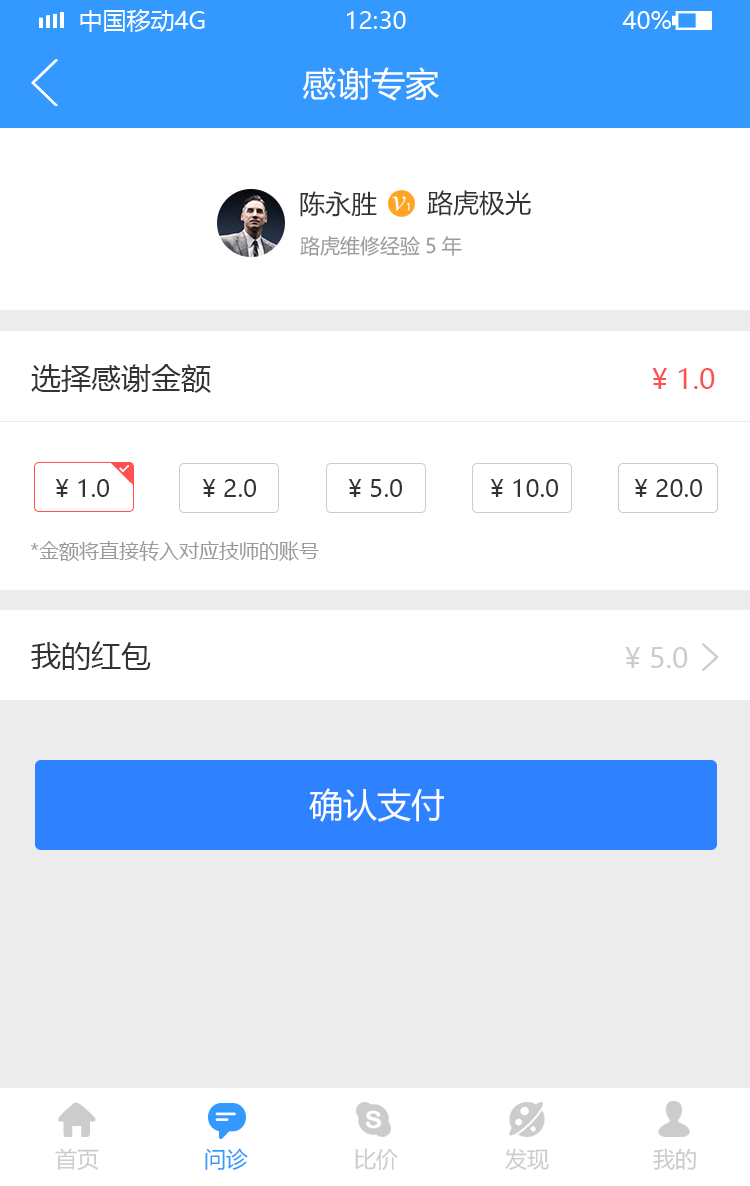
<style>
.page{position:relative;width:750px;height:1186px;background:#ffffff}
.page>*{position:absolute;margin:0}
.t1{font:34px "MicrosoftYaHei";color:#ffffff}
.t2{font:26px "MicrosoftYaHei";color:#333333}
.t3{font:20px "MicrosoftYaHei";color:#999999}
.t4{font:30px "MicrosoftYaHei";color:#333333}
.t5{font:28px "MicrosoftYaHei";color:#ff5050}
.t6{font:24px "MicrosoftYaHei";color:#333333}
.t7{font:28px "MicrosoftYaHei";color:#cccccc}
.t8{font:22px "MicrosoftYaHei";color:#cccccc}
.t9{font:22px "MicrosoftYaHei";color:#3399ff}
</style>
<div class="page">
<p class="t1" style="left:302px;top:67px;width:137px;height:34px">感谢专家</p>
<p class="t2" style="left:300px;top:191px;width:77px;height:26px">陈永胜</p>
<p class="t2" style="left:427px;top:190px;width:104px;height:26px">路虎极光</p>
<p class="t3" style="left:300px;top:236px;width:162px;height:20px">路虎维修经验5年</p>
<p class="t4" style="left:31px;top:364px;width:180px;height:29px">选择感谢金额</p>
<p class="t5" style="left:652px;top:368px;width:63px;height:21px">¥ 1.0</p>
<p class="t6" style="left:55px;top:479px;width:54px;height:18px">¥ 1.0</p>
<p class="t6" style="left:202px;top:479px;width:54px;height:18px">¥ 2.0</p>
<p class="t6" style="left:348px;top:479px;width:54px;height:18px">¥ 5.0</p>
<p class="t6" style="left:490px;top:479px;width:68px;height:18px">¥ 10.0</p>
<p class="t6" style="left:634px;top:479px;width:68px;height:18px">¥ 20.0</p>
<p class="t3" style="left:30px;top:541px;width:289px;height:20px">*金额将直接转入对应技师的账号</p>
<p class="t4" style="left:31px;top:641px;width:120px;height:29px">我的红包</p>
<p class="t7" style="left:625px;top:647px;width:63px;height:21px">¥ 5.0</p>
<p class="t1" style="left:309px;top:788px;width:135px;height:34px">确认支付</p>
<p class="t8" style="left:55px;top:1148px;width:44px;height:22px">首页</p>
<p class="t9" style="left:205px;top:1148px;width:43px;height:22px">问诊</p>
<p class="t8" style="left:355px;top:1148px;width:43px;height:22px">比价</p>
<p class="t8" style="left:505px;top:1148px;width:44px;height:22px">发现</p>
<p class="t8" style="left:653px;top:1148px;width:43px;height:22px">我的</p>
</div>
